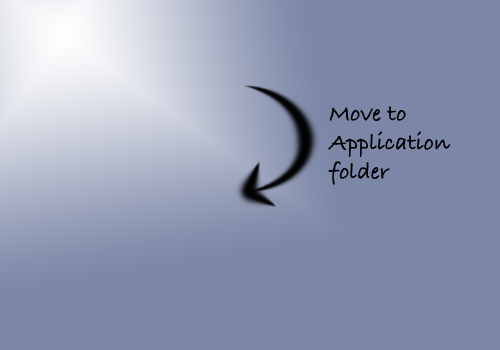
<style>
.page{position:relative;width:500px;height:350px;background:#7c87a7}
.page>*{position:absolute;margin:0}
.t1{font:24px "BradleyHandITCTTBold";color:#000000}
</style>
<div class="page">
<p class="t1" style="left:328px;top:106px;width:123px;height:79px">Move to<br>Application<br>folder</p>
</div>
